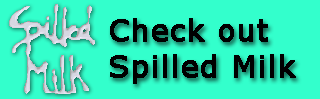
<style>
.page{position:relative;width:320px;height:99px;background:#33ffcc}
.page>*{position:absolute;margin:0}
.t1{font:30px "Verdana";color:#000000;font-weight:bold}
</style>
<div class="page">
<p class="t1" style="left:110px;top:18px;width:186px;height:66px">Check out<br>Spilled Milk</p>
</div>
